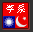
<style>
.page{position:relative;width:33px;height:32px;background:#f20000}
.page>*{position:absolute;margin:0}
.t1{font:10.4px "SimSun";color:#ffffff}
</style>
<div class="page">
<p class="t1" style="left:6px;top:4px;width:19px;height:9px">李系</p>
</div>
